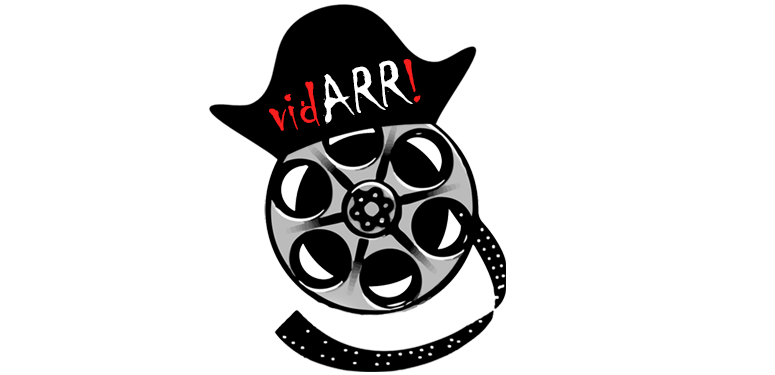
<style>
.page{position:relative;width:775px;height:375px;background:#ffffff}
.page>*{position:absolute;margin:0}
.t1{font:65.2px "Chiller-Regular";color:#f91f1f}
.t2{font:65.2px "Chiller-Regular";color:#ffffff}
</style>
<div class="page">
<p class="t1" style="left:269px;top:59px;width:152px;height:72px;rotate:-13deg">vid<span class="t2">ARR</span>!</p>
</div>
